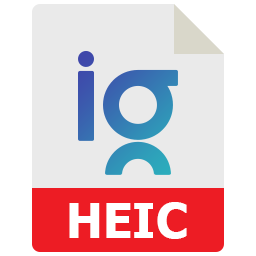
<style>
.page{position:relative;width:256px;height:256px;background:#eaeaea}
.page>*{position:absolute;margin:0}
.t1{font:48px "Tahoma-Bold";color:#ffffff}
</style>
<div class="page">
<p class="t1" style="left:69px;top:202px;width:118px;height:37px">HEIC</p>
</div>
